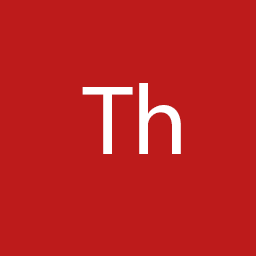
<style>
.page{position:relative;width:256px;height:256px;background:#bd1b1b}
.page>*{position:absolute;margin:0}
.t1{font:100px "MyriadPro-Regular";color:#ffffff}
</style>
<div class="page">
<p class="t1" style="left:82px;top:83px;width:99px;height:71px">Th</p>
</div>
